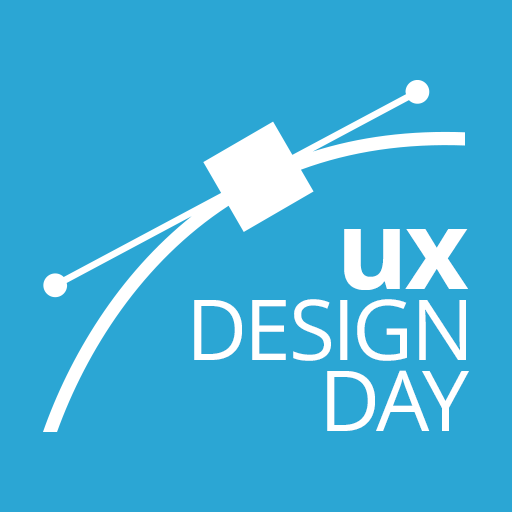
<style>
.page{position:relative;width:512px;height:512px;background:#2ba6d4}
.page>*{position:absolute;margin:0}
.t1{font:110px "OpenSans-Bold";letter-spacing:-0.025em;color:#ffffff}
.t2{font:84px "OpenSans";letter-spacing:-0.025em;color:#ffffff}
</style>
<div class="page">
<p class="t1" style="left:344px;top:229px;width:124px;height:61px">ux</p>
<p class="t2" style="left:194px;top:299px;width:272px;height:62px">DESIGN</p>
<p class="t2" style="left:327px;top:370px;width:142px;height:61px">DAY</p>
</div>
